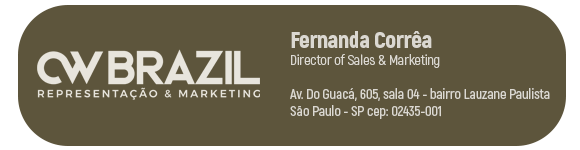
<style>
.page{position:relative;width:580px;height:150px;background:#5d553c}
.page>*{position:absolute;margin:0}
.t1{font:14.2px "Akrobat-SemiBold";letter-spacing:-0.01em;color:#dbd8d1}
.t2{font:22.9px "Akrobat-Black";letter-spacing:-0.01em;color:#dbd8d1}
.t3{font:14.2px "Akrobat-Regular";letter-spacing:-0.01em;color:#dbd8d1}
</style>
<div class="page">
<p class="t1" style="left:290px;top:31px;width:260px;height:88px"><span class="t2">Fernanda Corrêa <br></span><span class="t3">Director of Sales &amp; Marketing<br><br></span>Av. Do Guacá, 605, sala 04 - bairro Lauzane Paulista <br>São Paulo - SP cep: 02435-001</p>
</div>
